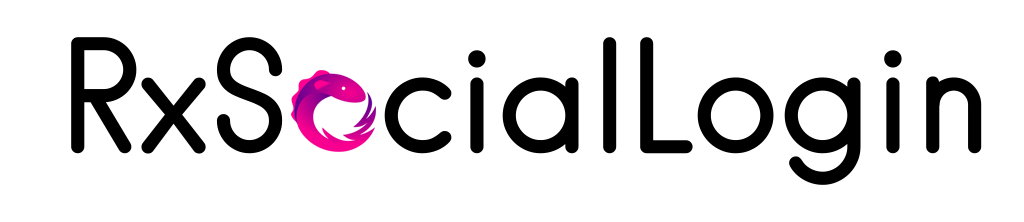
<style>
.page{position:relative;width:1024px;height:222px;background:#ffffff}
.page>*{position:absolute;margin:0}
.t1{font:146.7px "Hanken-Book";color:#000000}
</style>
<div class="page">
<p class="t1" style="left:71px;top:37px;width:212px;height:117px">RxS</p>
<p class="t1" style="left:384px;top:37px;width:598px;height:148px">cialLogin</p>
</div>
